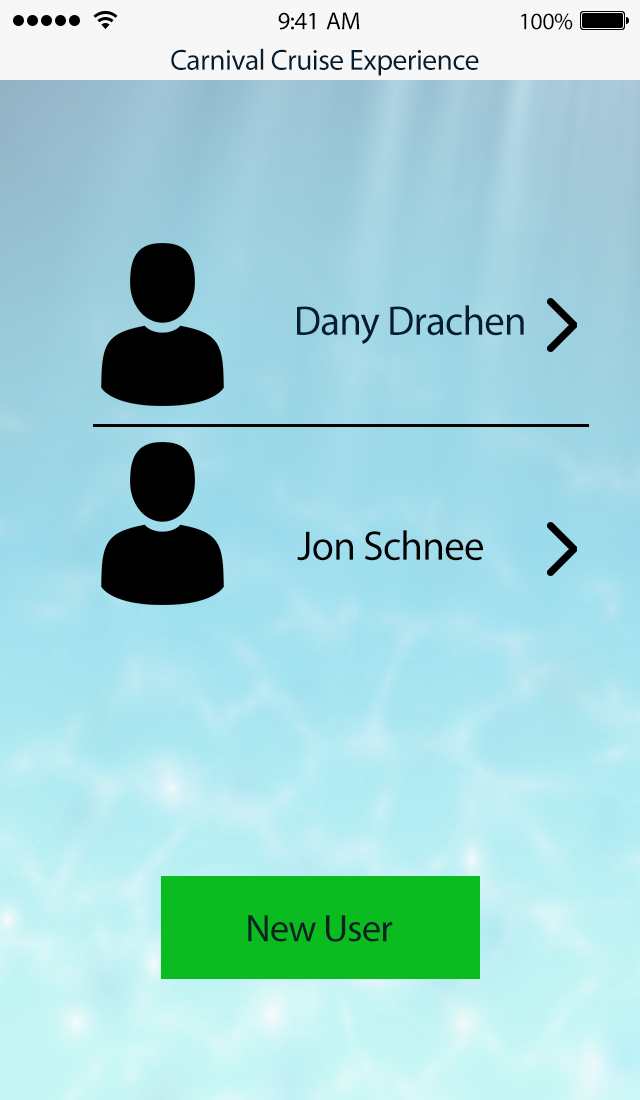
<style>
.page{position:relative;width:640px;height:1100px}
.page>*{position:absolute;margin:0}
.t1{font:25px "MyriadPro-Regular";letter-spacing:-0.02em;color:#000000}
.t2{font:24px "MyriadPro-Regular";letter-spacing:-0.02em;color:#000000}
.t3{font:29.4px "MyriadPro-Regular";letter-spacing:-0.02em;color:#061d30}
.t4{font:41.4px "MyriadPro-Regular";letter-spacing:-0.02em;color:#061d30}
.t5{font:41.4px "MyriadPro-Regular";letter-spacing:-0.02em;color:#000000}
.t6{font:38.6px "MyriadPro-Regular";letter-spacing:-0.02em;color:#0a2320}
</style>
<div class="page">
<p class="t1" style="left:278px;top:12px;width:82px;height:18px">9:41 AM</p>
<p class="t2" style="left:521px;top:13px;width:52px;height:17px">100%</p>
<p class="t3" style="left:171px;top:48px;width:308px;height:28px">Carnival Cruise Experience</p>
<p class="t4" style="left:297px;top:305px;width:227px;height:39px">Dany Drachen</p>
<p class="t5" style="left:297px;top:530px;width:186px;height:31px">Jon Schnee</p>
<p class="t6" style="left:248px;top:915px;width:145px;height:27px">New User</p>
</div>
